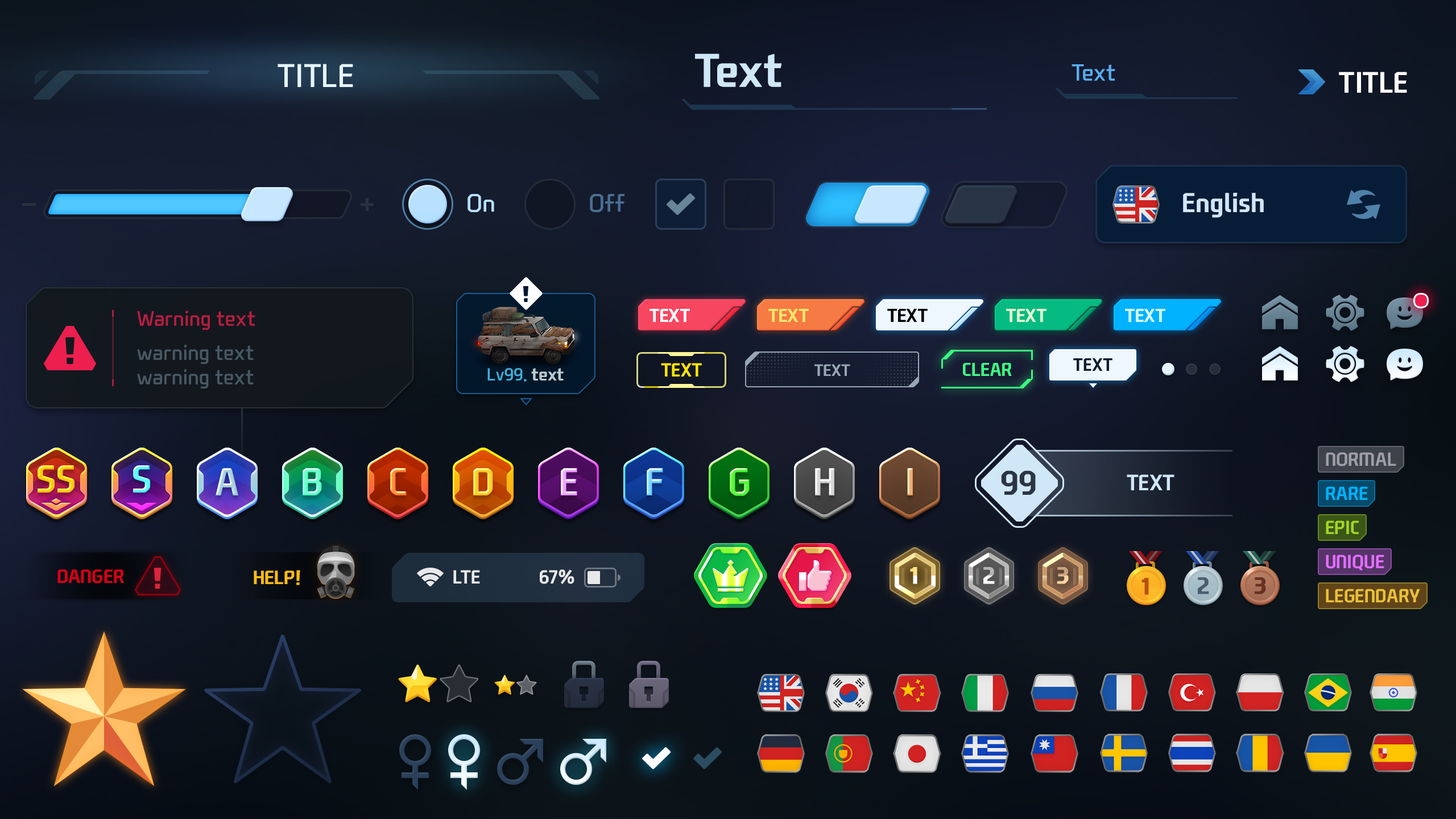
<style>
.page{position:relative;width:1456px;height:819px}
.page>*{position:absolute;margin:0}
.t1{font:45.5px "NEXONFootballGothicB";color:#cfe7f7}
.t2{font:31.8px "NEXONFootballGothicL";color:#e6f6ff;text-transform:uppercase}
.t3{font:22.7px "NEXONFootballGothicL";color:#5baeee}
.t4{font:28.4px "NEXONFootballGothicB";color:#ffffff;text-transform:uppercase}
.t5{font:23.9px "NEXONFootballGothicL";color:#b4dffe}
.t6{font:23.9px "NEXONFootballGothicL";color:#496e91}
.t7{font:26.2px "NEXONFootballGothicB";color:#cfe7f7}
.t8{font:20.5px "NEXONFootballGothicL";color:#b71d41}
.t9{font:17.9px "NEXONFootballGothicB";color:#ffffff;text-transform:uppercase}
.t10{font:17.9px "NEXONFootballGothicB";color:#fde76b;text-transform:uppercase}
.t11{font:17.9px "NEXONFootballGothicB";color:#000000;text-transform:uppercase}
.t12{font:17.9px "NEXONFootballGothicB";color:#e3ffd2;text-transform:uppercase}
.t13{font:17.9px "NEXONFootballGothicB";color:#d5ffff;text-transform:uppercase}
.t14{font:20.5px "NEXONFootballGothicL";color:#495964}
.t15{font:18.2px "NEXONFootballGothicB";color:#ffe500;text-transform:uppercase}
.t16{font:15.9px "NEXONFootballGothicB";color:#97a6b3;text-transform:uppercase}
.t17{font:18.1px "NEXONFootballGothicB";color:#3eff85;text-transform:uppercase}
.t18{font:17.2px "NEXONFootballGothicB";color:#0d1b2e;text-transform:uppercase}
.t19{font:17.1px "NEXONFootballGothicL";color:#40b2dc}
.t20{font:17.1px "NEXONFootballGothicB";color:#bccbd0}
.t21{font:18.2px "NEXONFootballGothicB";color:#9e9ea8;text-transform:uppercase}
.t22{font:37.5px "NEXONFootballGothicB";letter-spacing:-0.02em;color:#ffcb18;text-transform:uppercase}
.t23{font:37.5px "NEXONFootballGothicB";letter-spacing:-0.02em;color:#61f8f9;text-transform:uppercase}
.t24{font:37.5px "NEXONFootballGothicB";letter-spacing:-0.02em;color:#aed1de;text-transform:uppercase}
.t25{font:37.5px "NEXONFootballGothicB";letter-spacing:-0.02em;text-transform:uppercase}
.t26{font:37.5px "NEXONFootballGothicB";letter-spacing:-0.02em;color:#ffd035;text-transform:uppercase}
.t27{font:37.5px "NEXONFootballGothicB";letter-spacing:-0.02em;color:#5ef445;text-transform:uppercase}
.t28{font:37.5px "NEXONFootballGothicB";letter-spacing:-0.02em;color:#d8d8d8;text-transform:uppercase}
.t29{font:32.6px "NEXONFootballGothicB";color:#2c3542}
.t30{font:21.3px "NEXONFootballGothicB";color:#cfe7f7;text-transform:uppercase}
.t31{font:18.2px "NEXONFootballGothicB";color:#00b2ff;text-transform:uppercase}
.t32{font:18.2px "NEXONFootballGothicB";color:#a1d622;text-transform:uppercase}
.t33{font:18.2px "NEXONFootballGothicB";color:#e16efd;text-transform:uppercase}
.t34{font:18.4px "NEXONFootballGothicB";color:#d50019;text-transform:uppercase}
.t35{font:18.4px "NEXONFootballGothicB";color:#ffbc13;text-transform:uppercase}
.t36{font:18.2px "NEXONFootballGothicB";color:#e8e8ea}
.t37{font:22.7px "NEXONFootballGothicB";text-transform:uppercase;font-weight:bold}
.t38{font:22.7px "NEXONFootballGothicB";color:#b6510e;text-transform:uppercase;font-weight:bold}
.t39{font:22.7px "NEXONFootballGothicB";color:#4b5e70;text-transform:uppercase;font-weight:bold}
.t40{font:22.7px "NEXONFootballGothicB";color:#673123;text-transform:uppercase;font-weight:bold}
.t41{font:18.2px "NEXONFootballGothicB";color:#eac03a;text-transform:uppercase}
</style>
<div class="page">
<p class="t1" style="left:695px;top:53px;width:87px;height:34px">Text</p>
<p class="t2" style="left:278px;top:64px;width:75px;height:23px">Title</p>
<p class="t3" style="left:1072px;top:64px;width:43px;height:17px">Text</p>
<p class="t4" style="left:1339px;top:72px;width:68px;height:21px">Title</p>
<p class="t5" style="left:468px;top:194px;width:26px;height:18px">On</p>
<p class="t6" style="left:590px;top:194px;width:34px;height:18px">Off</p>
<p class="t7" style="left:1183px;top:193px;width:81px;height:25px">English</p>
<p class="t8" style="left:137px;top:311px;width:118px;height:19px">Warning text</p>
<p class="t9" style="left:650px;top:309px;width:40px;height:13px">Text</p>
<p class="t10" style="left:768px;top:309px;width:41px;height:13px">Text</p>
<p class="t11" style="left:887px;top:309px;width:41px;height:13px">Text</p>
<p class="t12" style="left:1006px;top:309px;width:40px;height:13px">Text</p>
<p class="t13" style="left:1125px;top:309px;width:40px;height:13px">Text</p>
<p class="t14" style="left:137px;top:345px;width:117px;height:43px">warning text<br>warning text</p>
<p class="t15" style="left:661px;top:363px;width:41px;height:14px">Text</p>
<p class="t16" style="left:814px;top:364px;width:36px;height:12px">Text</p>
<p class="t17" style="left:963px;top:363px;width:49px;height:13px">Clear</p>
<p class="t18" style="left:1073px;top:358px;width:39px;height:13px">Text</p>
<p class="t19" style="left:487px;top:368px;width:77px;height:14px">Lv99. <span class="t20">text</span></p>
<p class="t21" style="left:1326px;top:452px;width:70px;height:14px">NORMAL</p>
<p class="t22" style="left:38px;top:465px;width:37px;height:28px">SS</p>
<p class="t23" style="left:133px;top:465px;width:17px;height:28px">S</p>
<p class="t24" style="left:216px;top:468px;width:22px;height:27px">A</p>
<p class="t25" style="left:303px;top:468px;width:19px;height:27px">B</p>
<p class="t25" style="left:390px;top:468px;width:17px;height:27px">C</p>
<p class="t26" style="left:473px;top:468px;width:20px;height:27px">D</p>
<p class="t25" style="left:561px;top:468px;width:16px;height:27px">E</p>
<p class="t25" style="left:647px;top:468px;width:16px;height:27px">F</p>
<p class="t27" style="left:730px;top:468px;width:20px;height:28px">G</p>
<p class="t28" style="left:815px;top:468px;width:19px;height:27px">H</p>
<p class="t25" style="left:907px;top:468px;width:6px;height:27px">I</p>
<p class="t29" style="left:1001px;top:470px;width:35px;height:25px">99</p>
<p class="t30" style="left:1127px;top:474px;width:47px;height:16px">Text</p>
<p class="t31" style="left:1326px;top:486px;width:42px;height:14px">Rare</p>
<p class="t32" style="left:1326px;top:520px;width:33px;height:14px">Epic</p>
<p class="t33" style="left:1326px;top:555px;width:58px;height:15px">Unique</p>
<p class="t34" style="left:57px;top:569px;width:67px;height:15px">Danger</p>
<p class="t35" style="left:254px;top:570px;width:46px;height:15px">Help!</p>
<p class="t36" style="left:453px;top:570px;width:27px;height:14px">LTE</p>
<p class="t36" style="left:540px;top:569px;width:34px;height:15px">67%</p>
<p class="t37" style="left:910px;top:567px;width:7px;height:17px">1</p>
<p class="t37" style="left:983px;top:567px;width:12px;height:17px">2</p>
<p class="t37" style="left:1057px;top:567px;width:12px;height:17px">3</p>
<p class="t38" style="left:1141px;top:578px;width:8px;height:17px">1</p>
<p class="t39" style="left:1198px;top:577px;width:11px;height:17px">2</p>
<p class="t40" style="left:1254px;top:577px;width:12px;height:17px">3</p>
<p class="t41" style="left:1326px;top:589px;width:94px;height:14px">Legendary</p>
</div>
